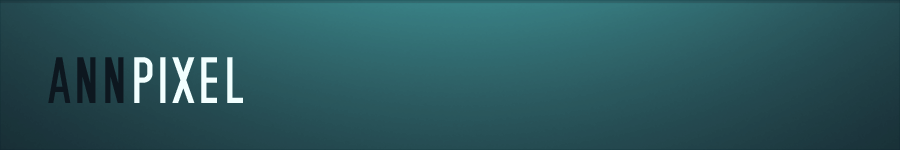
<style>
.page{position:relative;width:900px;height:150px}
.page>*{position:absolute;margin:0}
.t1{font:75px "SFMoviePoster";color:#f2ffff}
.t2{font:75px "SFMoviePoster";color:#0d171f}
</style>
<div class="page">
<p class="t1" style="left:48px;top:57px;width:195px;height:46px"><span class="t2">ann</span>pixel</p>
</div>
